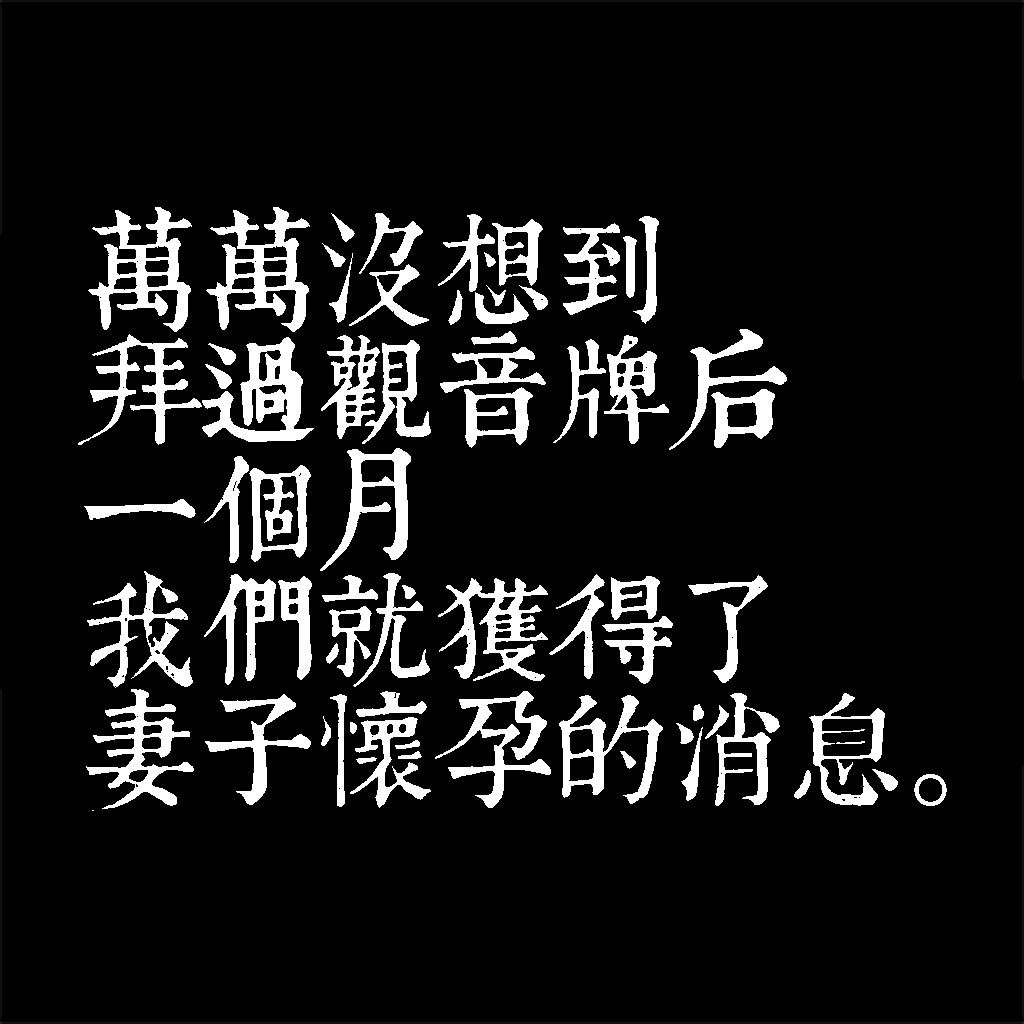
<style>
.page{position:relative;width:1024px;height:1024px;background:#000000}
.page>*{position:absolute;margin:0}
.t1{font:120px/120px "TpldKhangXiDictTrial";letter-spacing:-0.02em;color:#ffffff}
</style>
<div class="page">
<p class="t1" style="left:78px;top:207px;width:869px;height:604px">萬萬沒想到<br>拜過觀音牌后<br>一個月<br>我們就獲得了<br>妻子懷孕的消息。</p>
</div>
